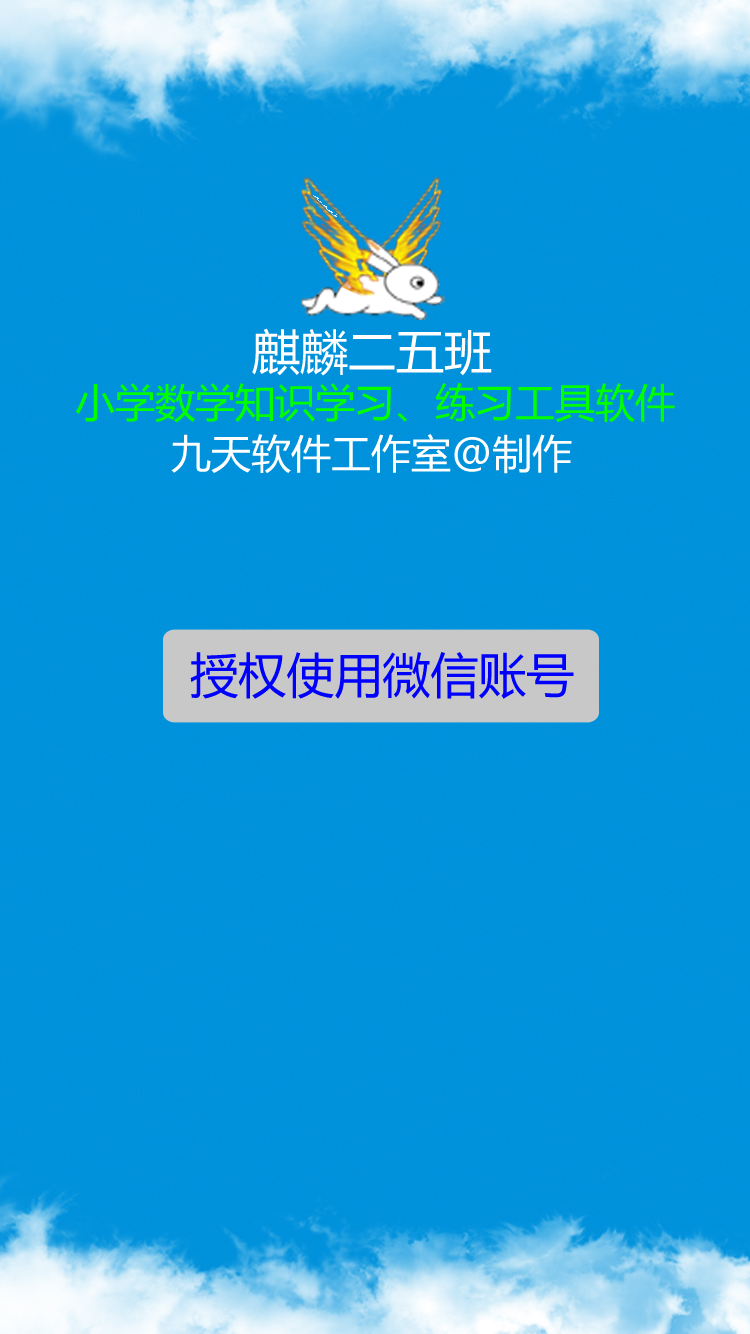
<style>
.page{position:relative;width:750px;height:1334px;background:#0091da}
.page>*{position:absolute;margin:0}
.t1{font:48px "MicrosoftYaHei";color:#ffffff}
.t2{font:40px "MicrosoftYaHei";color:#00ff00}
.t3{font:40px "MicrosoftYaHei";color:#ffffff}
.t4{font:48px "MicrosoftYaHei";color:#0000ff}
</style>
<div class="page">
<p class="t1" style="left:252px;top:328px;width:240px;height:48px">麒麟二五班</p>
<p class="t2" style="left:75px;top:383px;width:600px;height:40px">小学数学知识学习、练习工具软件</p>
<p class="t3" style="left:171px;top:434px;width:401px;height:40px">九天软件工作室@制作</p>
<p class="t4" style="left:190px;top:652px;width:384px;height:47px">授权使用微信账号</p>
</div>
